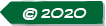
<style>
.page{position:relative;width:106px;height:26px;background:#006837}
.page>*{position:absolute;margin:0}
.t1{font:16px "SuplexmentaryComicNC";color:#ffffff}
</style>
<div class="page">
<p class="t1" style="left:22px;top:8px;width:65px;height:12px">© 2020</p>
</div>
